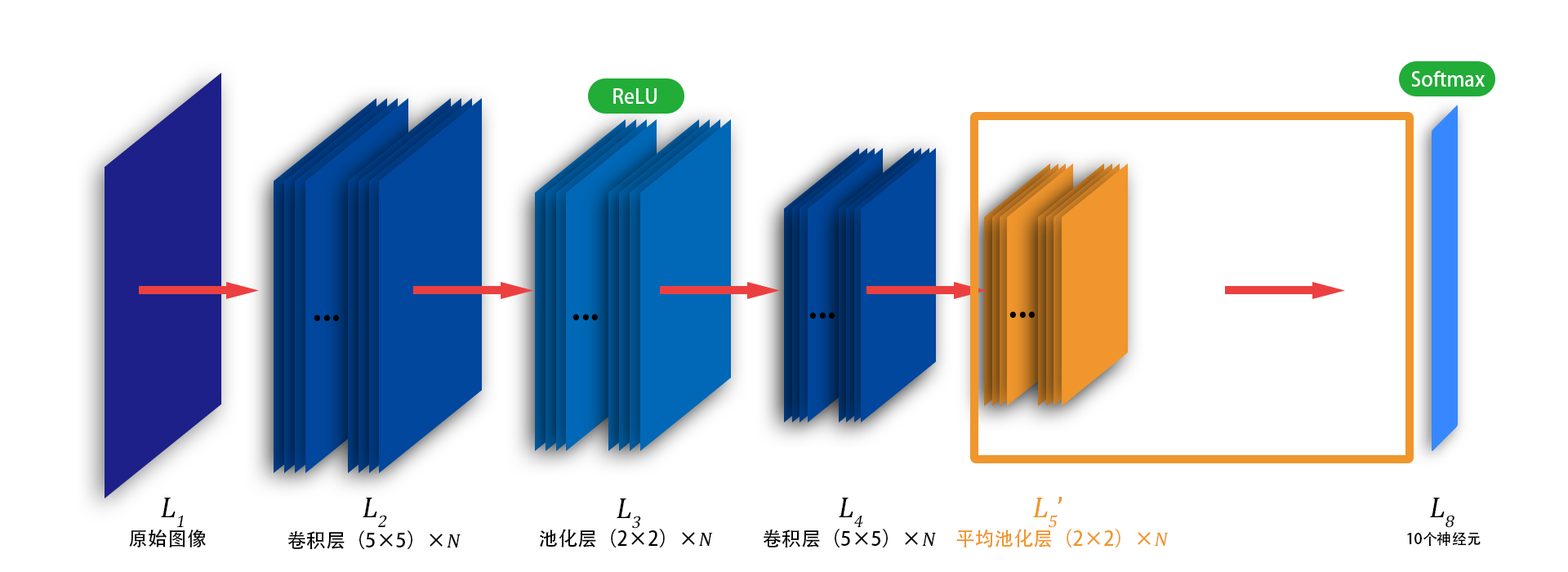
<style>
.page{position:relative;width:1568px;height:572px;background:#ffffff}
.page>*{position:absolute;margin:0}
.t1{font:19.6px "AdobeHeitiStd-Regular";color:#ffffff}
.t2{font:39.2px "AdobeHeitiStd-Regular";color:#000000}
.t3{font:29.4px "CambriaMath";color:#000000;font-style:italic}
.t4{font:29.4px "CambriaMath";color:#f0962c;font-style:italic}
.t5{font:29.4px "CambriaMath";color:#f0962c}
.t6{font:19.6px "AdobeHeitiStd-Regular";color:#000000}
.t7{font:19.6px "CambriaMath";color:#000000;font-style:italic}
.t8{font:19.6px "AdobeHeitiStd-Regular";color:#f0962c}
.t9{font:19.6px "CambriaMath";color:#f0962c;font-style:italic}
.t10{font:14.7px "AdobeHeitiStd-Regular";color:#000000}
</style>
<div class="page">
<p class="t1" style="left:1411px;top:70px;width:74px;height:17px">Softmax</p>
<p class="t1" style="left:613px;top:88px;width:44px;height:16px">ReLU</p>
<p class="t2" style="left:314px;top:314px;width:25px;height:7px">...</p>
<p class="t2" style="left:572px;top:314px;width:26px;height:6px">...</p>
<p class="t2" style="left:809px;top:312px;width:26px;height:6px">...</p>
<p class="t2" style="left:1009px;top:311px;width:26px;height:7px">...</p>
<p class="t3" style="left:161px;top:497px;width:23px;height:31px">L1</p>
<p class="t3" style="left:363px;top:497px;width:24px;height:31px">L2</p>
<p class="t3" style="left:839px;top:497px;width:24px;height:31px">L4</p>
<p class="t4" style="left:1033px;top:497px;width:29px;height:31px">L5<span class="t5">’</span></p>
<p class="t3" style="left:1430px;top:497px;width:24px;height:31px">L8</p>
<p class="t3" style="left:617px;top:498px;width:24px;height:30px">L3</p>
<p class="t6" style="left:129px;top:528px;width:77px;height:19px">原始图像</p>
<p class="t6" style="left:287px;top:530px;width:174px;height:19px">卷积层（5×5）×<span class="t7">N</span></p>
<p class="t6" style="left:540px;top:528px;width:173px;height:19px">池化层（2×2）×<span class="t7">N</span></p>
<p class="t6" style="left:763px;top:528px;width:173px;height:19px">卷积层（5×5）×<span class="t7">N</span></p>
<p class="t8" style="left:956px;top:528px;width:213px;height:19px">平均池化层（2×2）×<span class="t9">N</span></p>
<p class="t10" style="left:1407px;top:531px;width:74px;height:15px">10个神经元</p>
</div>
